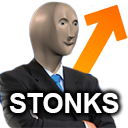
<style>
.page{position:relative;width:128px;height:128px;background:#ffffff}
.page>*{position:absolute;margin:0}
.t1{font:26.6px "Arial-BoldMT";color:#ffffff}
</style>
<div class="page">
<p class="t1" style="left:9px;top:93px;width:110px;height:20px">STONKS</p>
</div>
